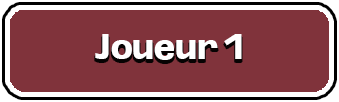
<style>
.page{position:relative;width:339px;height:102px;background:#80333b}
.page>*{position:absolute;margin:0}
.t1{font:33.8px "Oddlini-ExtraBold";color:#ffffff}
</style>
<div class="page">
<p class="t1" style="left:95px;top:34px;width:147px;height:26px">Joueur 1</p>
</div>
